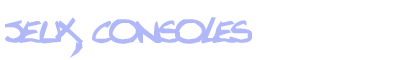
<style>
.page{position:relative;width:410px;height:60px;background:#ffffff}
.page>*{position:absolute;margin:0}
.t1{font:60px "Texted'critureLanfeust";color:#b0b8f9}
</style>
<div class="page">
<p class="t1" style="left:5px;top:17px;width:247px;height:41px">jeux, consoles</p>
</div>
